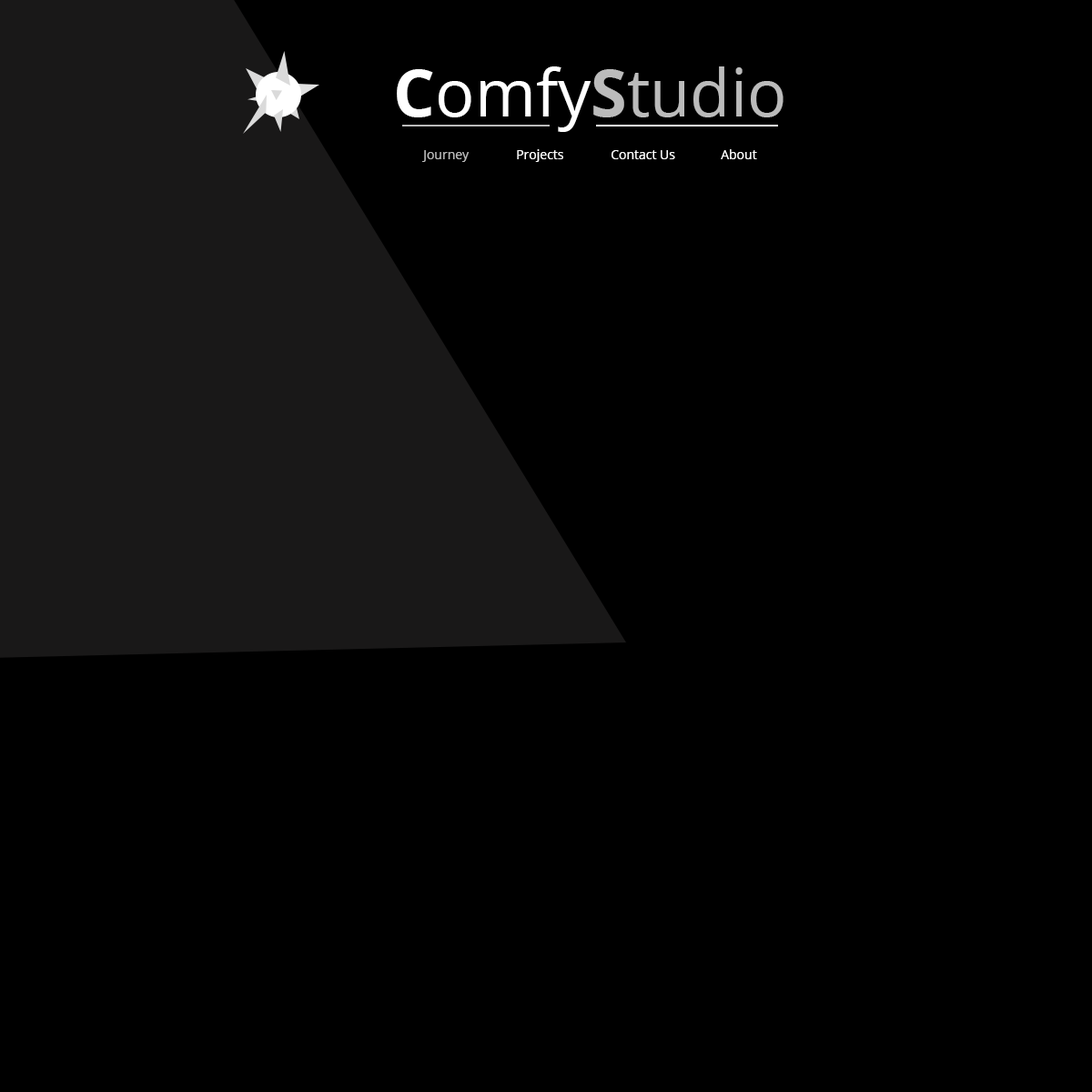
<style>
.page{position:relative;width:1092px;height:1092px;background:#000000}
.page>*{position:absolute;margin:0}
.t1{font:65.5px "OpenSans";color:#bbbbbb}
.t2{font:65.5px "OpenSans-Bold";color:#ffffff}
.t3{font:65.5px "OpenSans";color:#ffffff}
.t4{font:65.5px "OpenSans-Bold";color:#bbbbbb}
.t5{font:12.7px "OpenSans";color:#ffffff}
.t6{font:12.7px "OpenSans";color:#bbbbbb}
</style>
<div class="page">
<p class="t1" style="left:397px;top:66px;width:386px;height:66px"><span class="t2">C</span><span class="t3">omfy</span><span class="t4">S</span>tudio</p>
<p class="t5" style="left:517px;top:149px;width:46px;height:13px">Projects</p>
<p class="t5" style="left:721px;top:149px;width:36px;height:10px">About</p>
<p class="t6" style="left:422px;top:150px;width:48px;height:12px">Journey</p>
<p class="t5" style="left:612px;top:150px;width:63px;height:9px">Contact Us</p>
</div>
